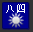
<style>
.page{position:relative;width:33px;height:32px;background:#000090}
.page>*{position:absolute;margin:0}
.t1{font:10.4px "SimSun";color:#ffffff}
</style>
<div class="page">
<p class="t1" style="left:6px;top:4px;width:19px;height:9px">八四</p>
</div>
